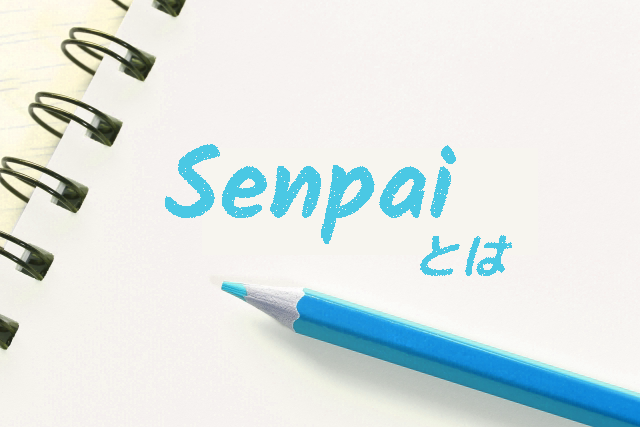
<style>
.page{position:relative;width:640px;height:427px}
.page>*{position:absolute;margin:0}
.t1{font:100px "Kalam-Bold";color:#4ac8e4}
.t2{font:48px "RoundedMplus1c-Bold";color:#4ac8e4}
</style>
<div class="page">
<p class="t1" style="left:164px;top:144px;width:293px;height:100px">Senpai</p>
<p class="t2" style="left:420px;top:235px;width:93px;height:41px">とは</p>
</div>
